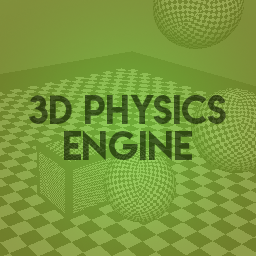
<style>
.page{position:relative;width:256px;height:256px}
.page>*{position:absolute;margin:0}
.t1{font:36px/35.5px "LemonMilk";color:#334f15}
</style>
<div class="page">
<p class="t1" style="left:29px;top:95px;width:197px;height:66px;text-align:center">3d Physics<br>Engine</p>
</div>
